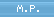
<style>
.page{position:relative;width:54px;height:17px}
.page>*{position:absolute;margin:0}
.t1{font:10.7px "Consolas";color:#ffffff}
</style>
<div class="page">
<p class="t1" style="left:17px;top:5px;width:22px;height:7px">M.P.</p>
</div>
